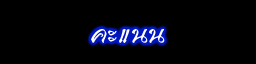
<style>
.page{position:relative;width:256px;height:64px;background:#000000}
.page>*{position:absolute;margin:0}
.t1{font:36px "DsSupasawatD";color:#ffffff}
</style>
<div class="page">
<p class="t1" style="left:91px;top:29px;width:74px;height:14px">¤Ðá¹¹</p>
</div>
